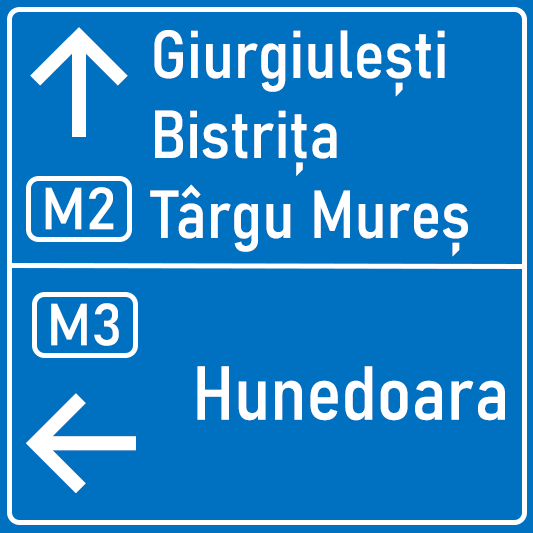
<style>
.page{position:relative;width:533px;height:533px;background:#0070c0}
.page>*{position:absolute;margin:0}
.t1{font:150px "Inter-Medium";color:#ffffff}
.t2{font:66.7px "Bahnschrift-SemiCondensed";color:#ffffff}
.t3{font:58.3px "Bahnschrift";color:#ffffff}
.t4{font:75px "Bahnschrift-SemiCondensed";color:#ffffff}
</style>
<div class="page">
<p class="t1" style="left:30px;top:27px;width:98px;height:110px">↑</p>
<p class="t2" style="left:150px;top:30px;width:318px;height:227px">Giurgiulești<br>Bistrița<br>Târgu Mureș</p>
<p class="t3" style="left:45px;top:187px;width:69px;height:43px">M2</p>
<p class="t3" style="left:51px;top:303px;width:68px;height:43px">M3</p>
<p class="t4" style="left:197px;top:366px;width:308px;height:55px">Hunedoara</p>
<p class="t1" style="left:26px;top:393px;width:110px;height:100px">←</p>
</div>
